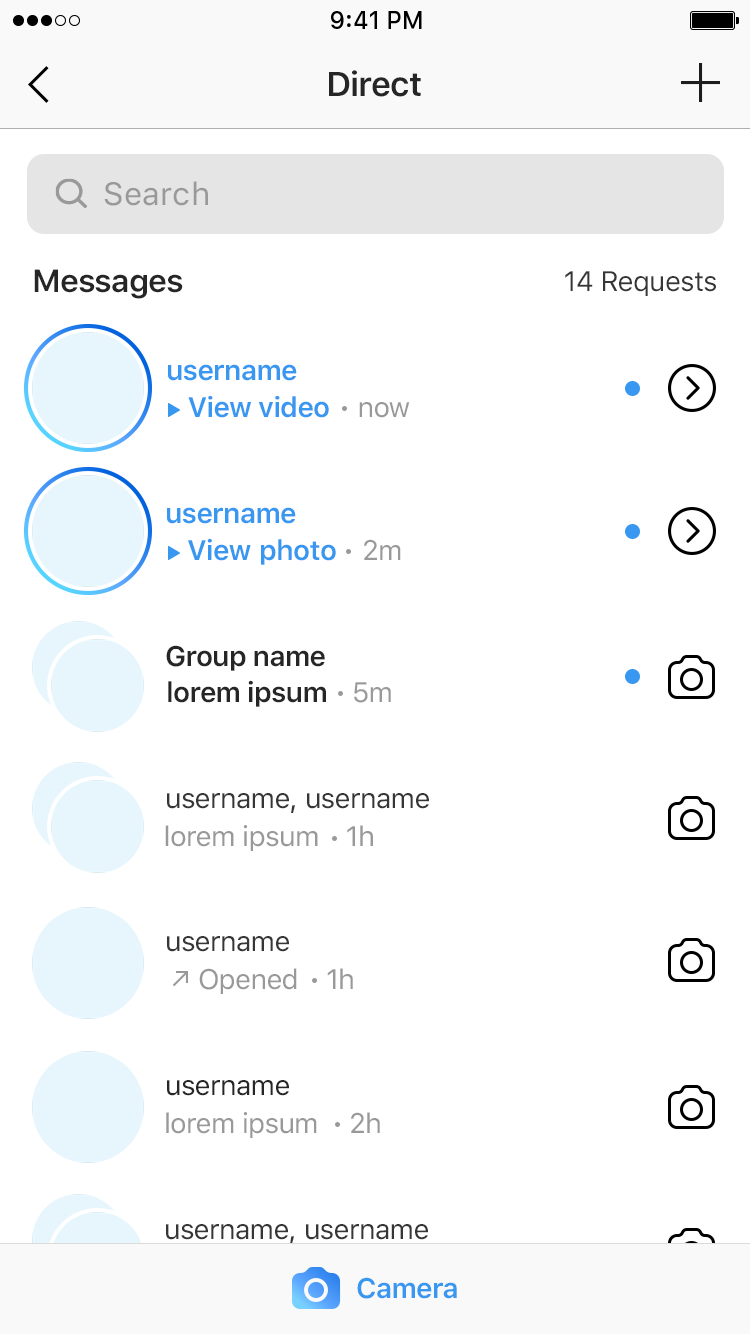
<style>
.page{position:relative;width:750px;height:1334px;background:#ffffff}
.page>*{position:absolute;margin:0}
.t1{font:34px "SFUIText-Semibold";letter-spacing:-0.025em;color:#262626}
.t2{font:32px "SFUIText-Regular";letter-spacing:0.01em;color:#999999}
.t3{font:32px "SFUIText-Semibold";letter-spacing:-0.025em;color:#262626}
.t4{font:28px "SFUIText-Regular";letter-spacing:-0.025em;color:#363636}
.t5{font:28px "SFUIText-Semibold";letter-spacing:-0.025em;color:#3897f0}
.t6{font:28px "SFUIText-Regular";letter-spacing:-0.025em;color:#999999}
.t7{font:28px "SFUIText-Semibold";letter-spacing:-0.025em;color:#262626}
.t8{font:28px "SFUIText-Regular";letter-spacing:-0.025em;color:#262626}
</style>
<div class="page">
<p class="t1" style="left:329px;top:70px;width:92px;height:27px">Direct</p>
<p class="t2" style="left:104px;top:181px;width:104px;height:25px">Search</p>
<p class="t3" style="left:34px;top:269px;width:149px;height:30px">Messages</p>
<p class="t4" style="left:565px;top:271px;width:151px;height:25px">14 Requests</p>
<p class="t5" style="left:168px;top:364px;width:129px;height:17px">username</p>
<p class="t5" style="left:188px;top:395px;width:141px;height:23px">View video</p>
<p class="t6" style="left:359px;top:402px;width:51px;height:16px">now</p>
<p class="t5" style="left:167px;top:507px;width:129px;height:17px">username</p>
<p class="t5" style="left:188px;top:538px;width:148px;height:27px">View photo</p>
<p class="t6" style="left:364px;top:539px;width:37px;height:21px">2m</p>
<p class="t7" style="left:166px;top:645px;width:159px;height:26px">Group name</p>
<p class="t7" style="left:168px;top:680px;width:158px;height:27px">lorem ipsum</p>
<p class="t6" style="left:354px;top:682px;width:37px;height:21px">5m</p>
<p class="t4" style="left:167px;top:793px;width:262px;height:20px">username, username</p>
<p class="t6" style="left:165px;top:825px;width:153px;height:26px">lorem ipsum</p>
<p class="t6" style="left:347px;top:825px;width:26px;height:21px">1h</p>
<p class="t4" style="left:167px;top:936px;width:122px;height:16px">username</p>
<p class="t6" style="left:199px;top:968px;width:98px;height:26px">Opened</p>
<p class="t6" style="left:327px;top:968px;width:26px;height:21px">1h</p>
<p class="t8" style="left:167px;top:1080px;width:122px;height:16px">username</p>
<p class="t6" style="left:166px;top:1112px;width:151px;height:26px">lorem ipsum</p>
<p class="t6" style="left:351px;top:1112px;width:29px;height:21px">2h</p>
<p class="t4" style="left:166px;top:1224px;width:262px;height:20px">username, username</p>
<p class="t5" style="left:357px;top:1277px;width:100px;height:22px">Camera</p>
</div>
